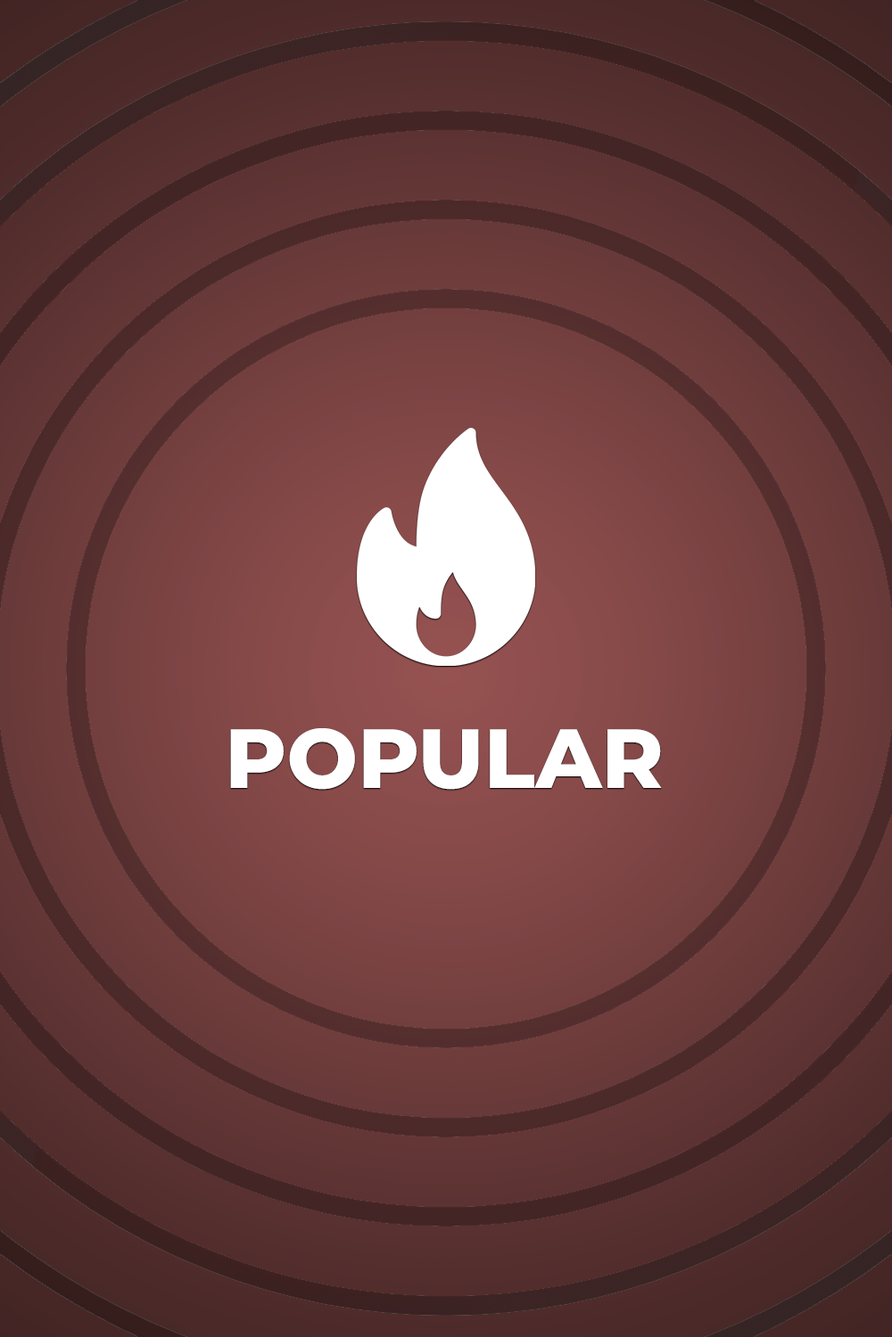
<style>
.page{position:relative;width:892px;height:1337px}
.page>*{position:absolute;margin:0}
.t1{font:83.8px "MontserratRoman-ExtraBold";color:#ffffff}
</style>
<div class="page">
<p class="t1" style="left:230px;top:728px;width:432px;height:62px">POPULAR</p>
</div>
